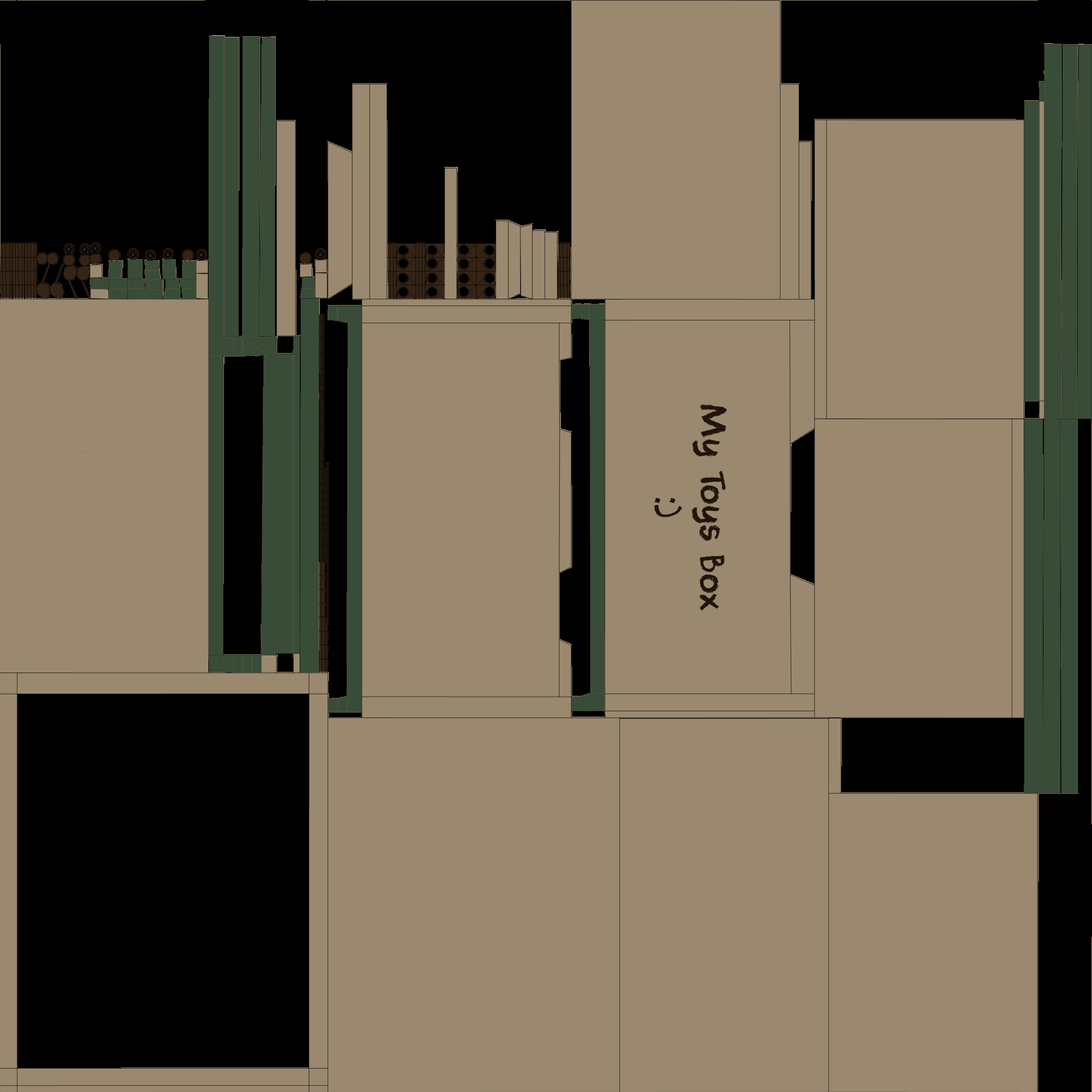
<style>
.page{position:relative;width:1092px;height:1092px;background:#9a896f}
.page>*{position:absolute;margin:0}
.t1{font:34.7px/7.5px "DKCoolCrayon";color:#352416}
</style>
<div class="page">
<p class="t1" style="left:654px;top:404px;width:73px;height:207px;text-align:center;rotate:90deg">My Toys Box <br><br><br><br><br><br>:)</p>
</div>
